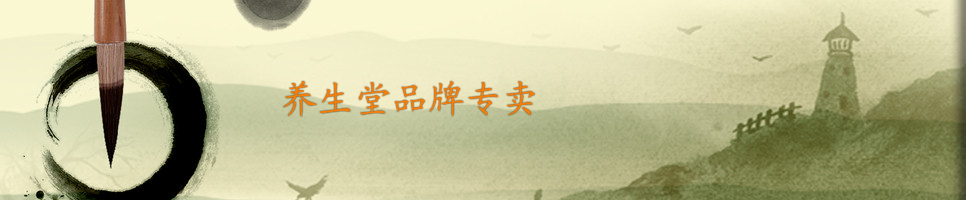
<style>
.page{position:relative;width:966px;height:200px}
.page>*{position:absolute;margin:0}
.t1{font:36px "KaiTi_GB2312";color:#f37e0b;font-weight:bold}
</style>
<div class="page">
<p class="t1" style="left:283px;top:81px;width:252px;height:36px">养生堂品牌专卖</p>
</div>
